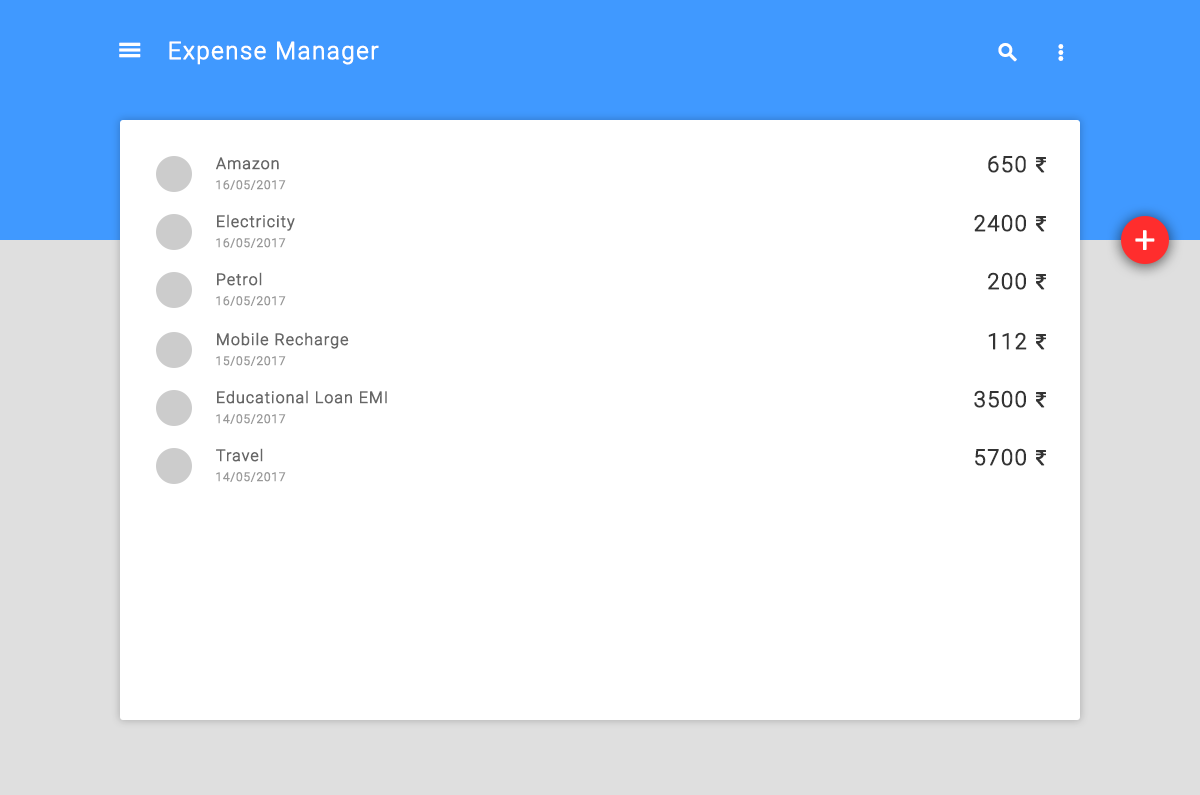
<style>
.page{position:relative;width:1200px;height:795px;background:#ffffff}
.page>*{position:absolute;margin:0}
.t1{font:24px "Roboto-Light";letter-spacing:0.04em;color:#ffffff;font-weight:bold}
.t2{font:16px "Roboto-Light";letter-spacing:0.04em;color:#666666;font-weight:bold}
.t3{font:22px "Roboto-Light";letter-spacing:0.04em;color:#333333;font-weight:bold}
.t4{font:22px "MyriadPro-Regular";letter-spacing:0.04em;color:#333333;font-weight:bold}
.t5{font:12px "Roboto-Light";letter-spacing:0.04em;color:#999999;font-weight:bold}
.t6{font:36px "Roboto-Light";letter-spacing:0.04em;color:#ffffff;font-weight:bold}
</style>
<div class="page">
<p class="t1" style="left:169px;top:41px;width:210px;height:24px">Expense Manager</p>
<p class="t2" style="left:216px;top:157px;width:63px;height:13px">Amazon</p>
<p class="t3" style="left:988px;top:155px;width:58px;height:18px">650 <span class="t4">₹</span></p>
<p class="t5" style="left:216px;top:180px;width:70px;height:10px">16/05/2017</p>
<p class="t2" style="left:217px;top:214px;width:78px;height:17px">Electricity</p>
<p class="t3" style="left:974px;top:214px;width:72px;height:18px">2400 <span class="t4">₹</span></p>
<p class="t6" style="left:1135px;top:230px;width:20px;height:20px">+</p>
<p class="t5" style="left:216px;top:238px;width:70px;height:10px">16/05/2017</p>
<p class="t2" style="left:217px;top:272px;width:45px;height:14px">Petrol</p>
<p class="t3" style="left:988px;top:272px;width:58px;height:18px">200 <span class="t4">₹</span></p>
<p class="t5" style="left:216px;top:296px;width:70px;height:10px">16/05/2017</p>
<p class="t2" style="left:217px;top:332px;width:132px;height:17px">Mobile Recharge</p>
<p class="t3" style="left:988px;top:332px;width:58px;height:18px">112 <span class="t4">₹</span></p>
<p class="t5" style="left:216px;top:356px;width:70px;height:10px">15/05/2017</p>
<p class="t2" style="left:217px;top:390px;width:170px;height:14px">Educational Loan EMI</p>
<p class="t3" style="left:974px;top:390px;width:72px;height:18px">3500 <span class="t4">₹</span></p>
<p class="t5" style="left:216px;top:414px;width:70px;height:10px">14/05/2017</p>
<p class="t2" style="left:216px;top:448px;width:47px;height:14px">Travel</p>
<p class="t3" style="left:975px;top:448px;width:71px;height:18px">5700 <span class="t4">₹</span></p>
<p class="t5" style="left:216px;top:472px;width:70px;height:10px">14/05/2017</p>
</div>
